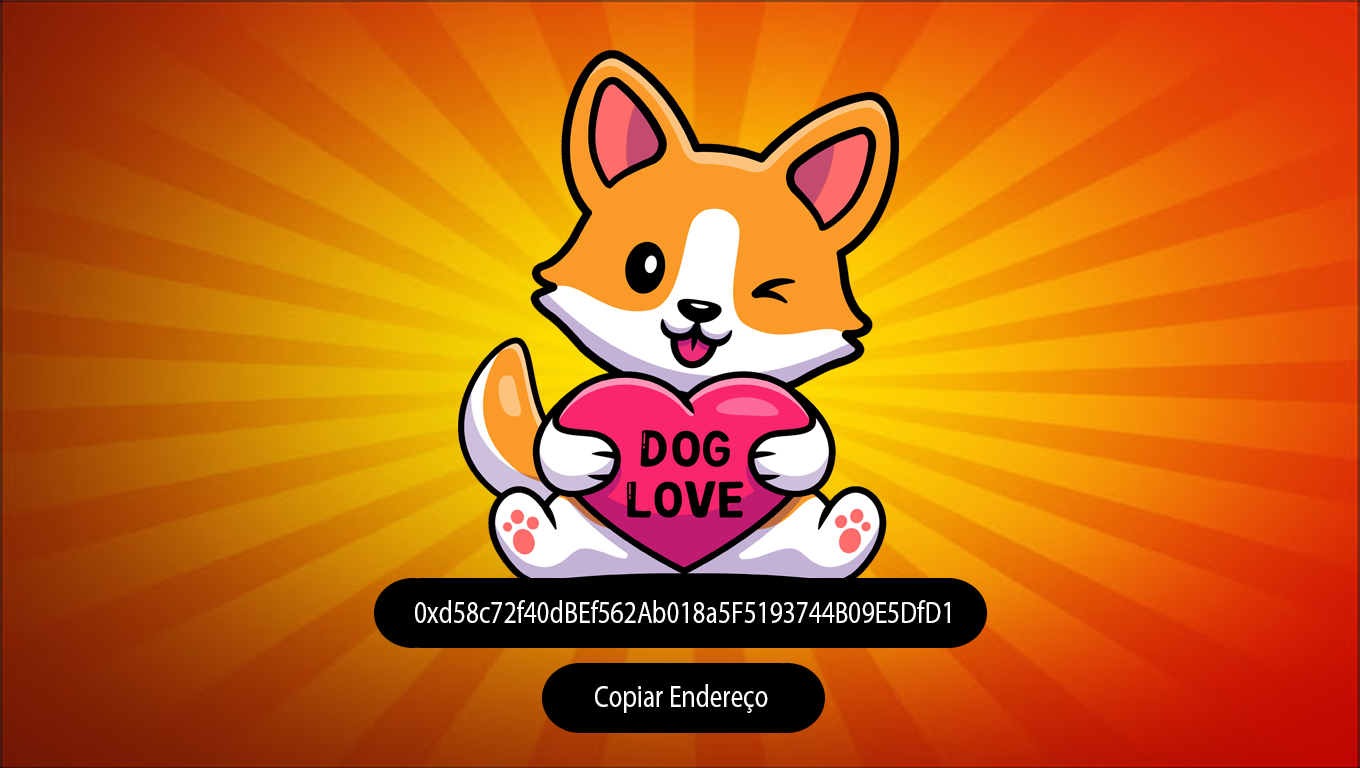
<style>
.page{position:relative;width:1360px;height:768px}
.page>*{position:absolute;margin:0}
.t1{font:31.3px "MyriadPro-Regular";color:#ffffff;scale:0.81 1}
</style>
<div class="page">
<p class="t1" style="left:415px;top:600px;width:535px;height:23px">0xd58c72f40dBEf562Ab018a5F5193744B09E5DfD1</p>
<p class="t1" style="left:595px;top:684px;width:173px;height:29px">Copiar Endereço</p>
</div>
